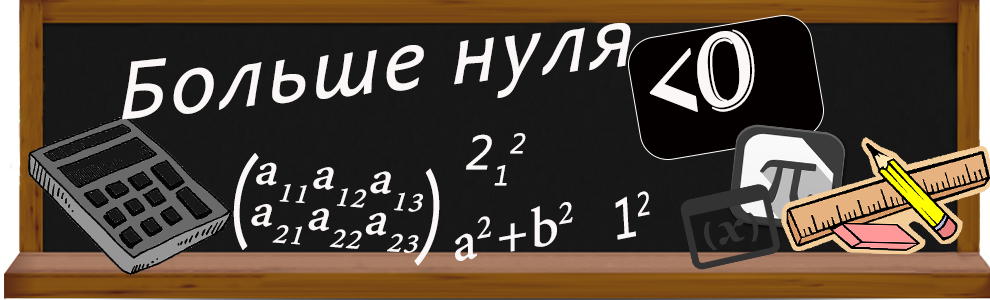
<style>
.page{position:relative;width:990px;height:300px;background:#171717}
.page>*{position:absolute;margin:0}
.t1{font:87px "Candara-Italic";letter-spacing:0.025em;color:#fcf7f7;font-weight:bold;font-style:italic}
.t2{font:112.8px "Algerian";letter-spacing:-0.05em;color:#fcf7f7;font-weight:bold;font-style:italic;scale:0.96 1}
.t3{font:48px "MicrosoftNewTaiLue";letter-spacing:0.025em;color:#fcf7f7;font-weight:bold;font-style:italic}
.t4{font:178.3px "Bahnschrift-Light";letter-spacing:0.025em;color:#fcf7f7;font-weight:bold;font-style:italic;scale:0.79 1}
.t5{font:47.6px/41.6px "MinionPro-Regular";letter-spacing:0.025em;color:#fcf7f7;font-weight:bold;font-style:italic;scale:1.08 1}
.t6{font:55.8px "MicrosoftNewTaiLue";letter-spacing:0.025em;color:#fcf7f7;font-weight:bold;font-style:italic;scale:0.82 1}
.t7{font:55px "MinionPro-Regular";letter-spacing:0.025em;color:#fcf7f7;font-weight:bold;font-style:italic}
</style>
<div class="page">
<p class="t1" style="left:122px;top:23px;width:509px;height:97px;rotate:-6deg">Больше нуля</p>
<p class="t2" style="left:649px;top:29px;width:106px;height:83px;rotate:-18deg">&lt;0</p>
<p class="t3" style="left:466px;top:133px;width:60px;height:53px">212</p>
<p class="t4" style="left:233px;top:153px;width:207px;height:113px;rotate:5deg">(          )</p>
<p class="t5" style="left:251px;top:162px;width:172px;height:91px;rotate:4deg">a11a12a13<br>a21a22a23</p>
<p class="t6" style="left:615px;top:191px;width:35px;height:49px;rotate:-11deg">12</p>
<p class="t7" style="left:455px;top:202px;width:118px;height:59px;rotate:-10deg">a2+b2</p>
</div>
